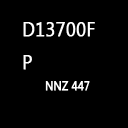
<style>
.page{position:relative;width:128px;height:128px;background:#000000}
.page>*{position:absolute;margin:0}
.t1{font:19.6px/16.7px "SegoeUI";letter-spacing:0.02em;color:#ffffff;font-weight:bold;scale:0.89 1}
.t2{font:11.8px "SegoeUI";letter-spacing:0.02em;color:#ffffff;font-weight:bold;scale:0.89 1}
</style>
<div class="page">
<p class="t1" style="left:23px;top:22px;width:72px;height:48px">D13700F<br><br>P</p>
<p class="t2" style="left:45px;top:81px;width:45px;height:10px">NNZ 447</p>
</div>
